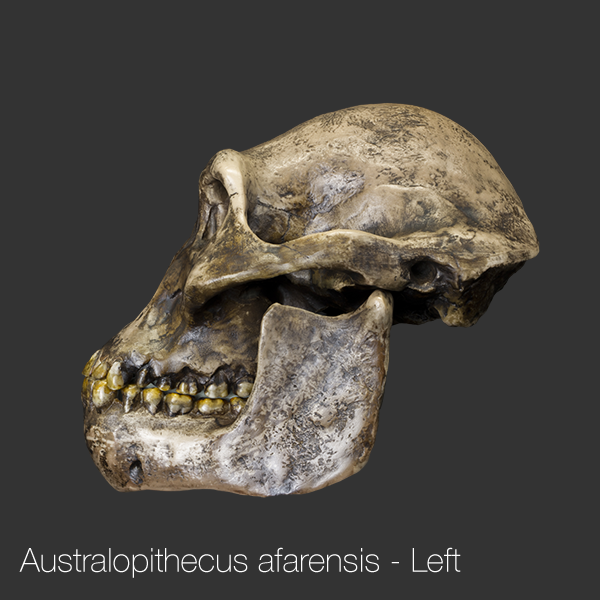
<style>
.page{position:relative;width:600px;height:600px;background:#333333}
.page>*{position:absolute;margin:0}
.t1{font:33.3px "HelveticaNeue-Thin";color:#ffffff}
</style>
<div class="page">
<p class="t1" style="left:19px;top:547px;width:442px;height:31px">Australopithecus afarensis - Left</p>
</div>
